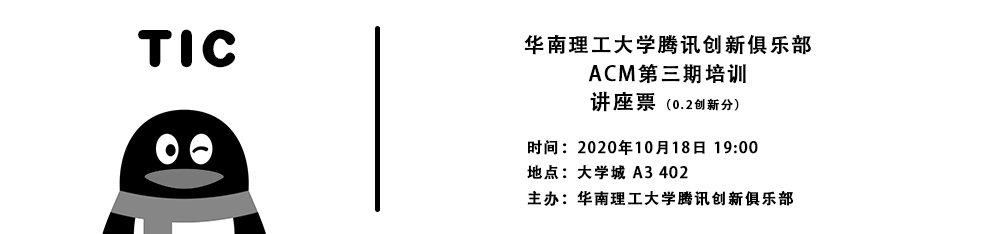
<style>
.page{position:relative;width:1000px;height:234px;background:#ffffff}
.page>*{position:absolute;margin:0}
.t1{font:51.5px "HGDY_CNKI";letter-spacing:0.08em;color:#000000;scale:0.96 1}
.t2{font:20.2px/28.6px "AdobeHeitiStd-Regular";letter-spacing:0.08em;color:#000000;font-weight:bold}
.t3{font:20.2px/22px "AdobeHeitiStd-Regular";letter-spacing:0.12em;color:#000000;font-weight:bold}
.t4{font:11.8px/22px "AdobeHeitiStd-Regular";letter-spacing:0.12em;color:#000000;font-weight:bold}
.t5{font:15.2px/25.6px "AdobeHeitiStd-Regular";letter-spacing:0.08em;color:#000000;font-weight:bold}
.t6{font:11.8px/25.6px "AdobeHeitiStd-Regular";letter-spacing:0.08em;color:#000000;font-weight:bold}
</style>
<div class="page">
<p class="t1" style="left:138px;top:29px;width:97px;height:39px">TIC</p>
<p class="t2" style="left:524px;top:34px;width:287px;height:78px;text-align:center">华南理工大学腾讯创新俱乐部<br>ACM第三期培训<br><span class="t3">讲座票</span><span class="t4">（0.2创新分）</span></p>
<p class="t5" style="left:527px;top:140px;width:266px;height:66px;text-align:center"><span class="t6"><br></span>时间：2020年10月18日 19:00<br>地点：大学城 A3 402<br>主办：华南理工大学腾讯创新俱乐部</p>
</div>
